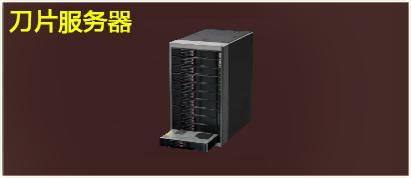
<style>
.page{position:relative;width:411px;height:178px}
.page>*{position:absolute;margin:0}
.t1{font:24px "MicrosoftYaHeiUI";color:#f4ff00;font-weight:bold}
</style>
<div class="page">
<p class="t1" style="left:9px;top:9px;width:123px;height:25px">刀片服务器</p>
</div>
